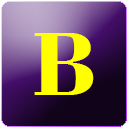
<style>
.page{position:relative;width:128px;height:128px}
.page>*{position:absolute;margin:0}
.t1{font:96px "BodoniBT-Bold";color:#ffff00}
</style>
<div class="page">
<p class="t1" style="left:34px;top:33px;width:60px;height:62px">B</p>
</div>
